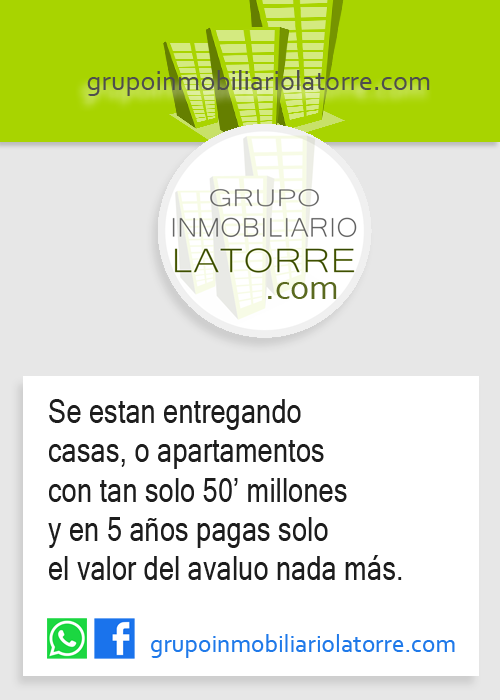
<style>
.page{position:relative;width:500px;height:700px;background:#ffffff}
.page>*{position:absolute;margin:0}
.t1{font:28.2px "Corbel";color:#4d4d4d}
.t2{font:36px "Corbel";color:#5a691f}
.t3{font:32.7px "MicrosoftSansSerif";color:#1d1d1d;scale:0.84 1}
.t4{font:25px "Corbel";color:#2079e8}
</style>
<div class="page">
<p class="t1" style="left:87px;top:70px;width:343px;height:26px">grupoinmobiliariolatorre.com</p>
<p class="t2" style="left:268px;top:282px;width:69px;height:17px">.com</p>
<p class="t3" style="left:48px;top:399px;width:354px;height:181px">Se estan entregando <br>casas, o apartamentos<br>con tan solo 50’ millones<br>y en 5 años pagas solo <br>el valor del avaluo nada más.</p>
<p class="t4" style="left:151px;top:634px;width:304px;height:24px">grupoinmobiliariolatorre.com</p>
</div>
